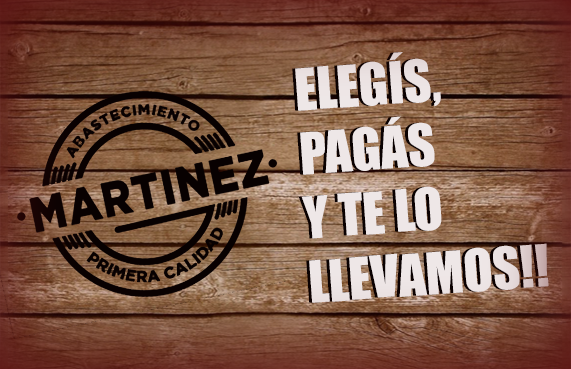
<style>
.page{position:relative;width:571px;height:369px}
.page>*{position:absolute;margin:0}
.t1{font:53.5px "Impact";color:#eee6e6}
.t2{font:53.5px "Impact";color:#eee7e7}
</style>
<div class="page">
<p class="t1" style="left:292px;top:52px;width:254px;height:251px;rotate:-4deg">ELEGÍS,<br>PAGÁS<br>Y TE LO<br>LLEVAMOS!!</p>
<p class="t2" style="left:295px;top:52px;width:254px;height:251px;rotate:-4deg">ELEGÍS,<br>PAGÁS<br>Y TE LO<br>LLEVAMOS!!</p>
</div>
